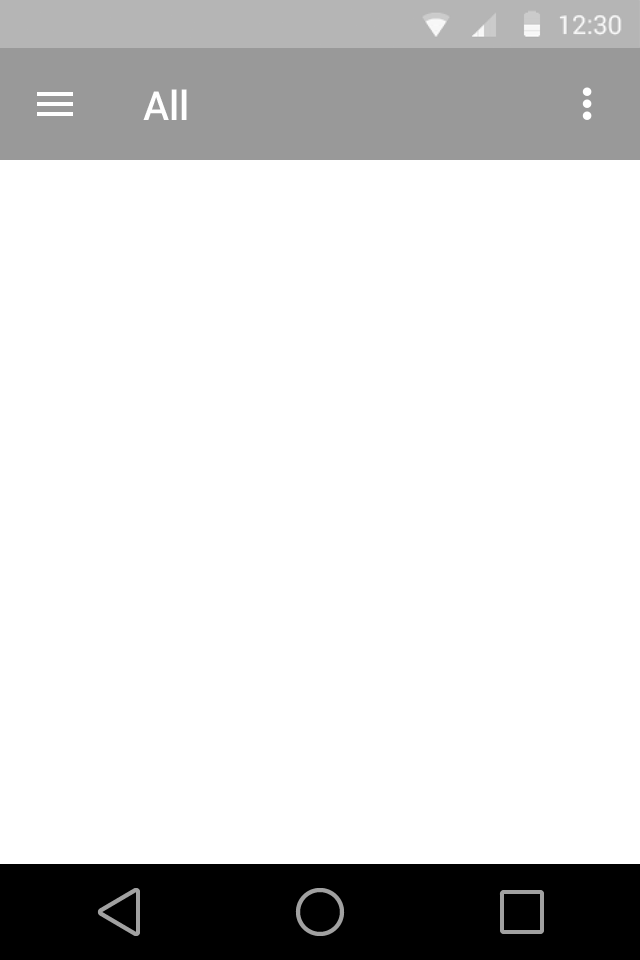
<style>
.page{position:relative;width:640px;height:960px;background:#ffffff}
.page>*{position:absolute;margin:0}
.t1{font:40px "Roboto-Medium";color:#ffffff}
</style>
<div class="page">
<p class="t1" style="left:143px;top:89px;width:44px;height:31px">All</p>
</div>
